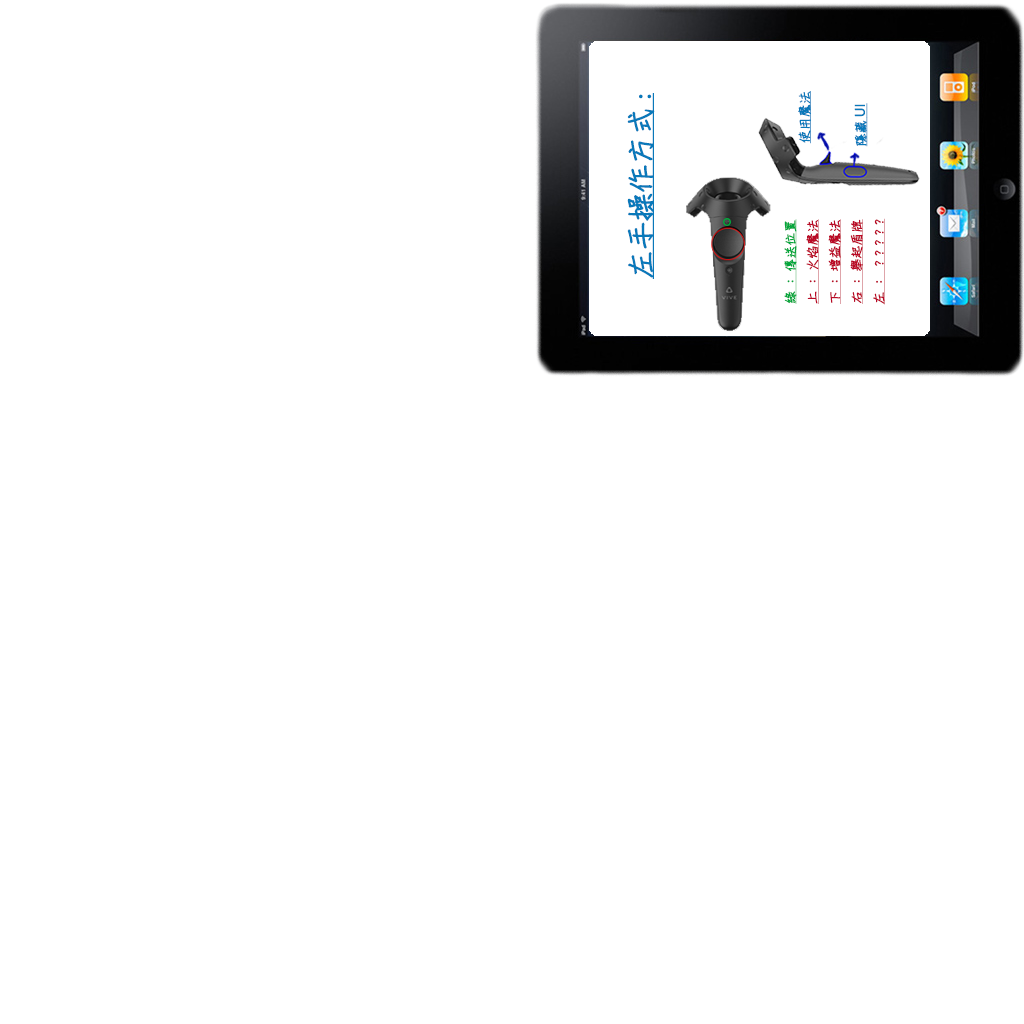
<style>
.page{position:relative;width:1024px;height:1024px;background:#ffffff}
.page>*{position:absolute;margin:0}
.t1{font:28px "DFChu-W4-WINP-BF";color:#0979ba;font-weight:bold;text-decoration:underline}
.t2{font:13px "DFChu-W4-WINP-BF";color:#0979ba;font-weight:bold;text-decoration:underline}
.t3{font:12.6px "DFChu-W4-WINP-BF";color:#0979ba;font-weight:bold;text-decoration:underline}
.t4{font:12.6px "MicrosoftJhengHeiUIRegular";color:#0979ba;font-weight:bold;text-decoration:underline}
.t5{font:12.6px "DFChu-W4-WINP-BF";color:#ba0926;font-weight:bold;text-decoration:underline}
.t6{font:12.6px "DFChu-W4-WINP-BF";color:#03a63c;font-weight:bold;text-decoration:underline}
</style>
<div class="page">
<p class="t1" style="left:627px;top:93px;width:28px;height:186px;rotate:-90deg">左手操作方式:</p>
<p class="t2" style="left:798px;top:91px;width:13px;height:53px;rotate:-90deg">使用魔法</p>
<p class="t3" style="left:854px;top:103px;width:14px;height:44px;rotate:-90deg">隱藏<span class="t4">UI</span></p>
<p class="t5" style="left:784px;top:218px;width:101px;height:87px;text-align:center;rotate:-90deg"><span class="t6">綠：傳送位置<br></span>上：火焰魔法<br>下：增益魔法<br>右：舉起盾牌<br>左：  ? ? ? ? ?</p>
</div>
